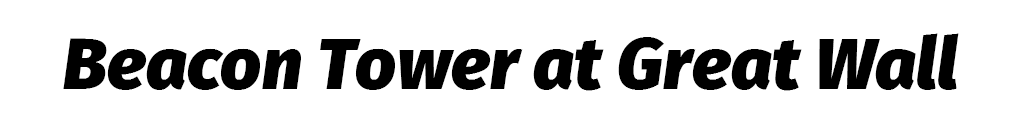
<style>
.page{position:relative;width:1024px;height:128px;background:#ffffff}
.page>*{position:absolute;margin:0}
.t1{font:71.8px "FiraSans-BlackItalic";color:#000000}
</style>
<div class="page">
<p class="t1" style="left:63px;top:33px;width:896px;height:58px">Beacon Tower at Great Wall</p>
</div>
